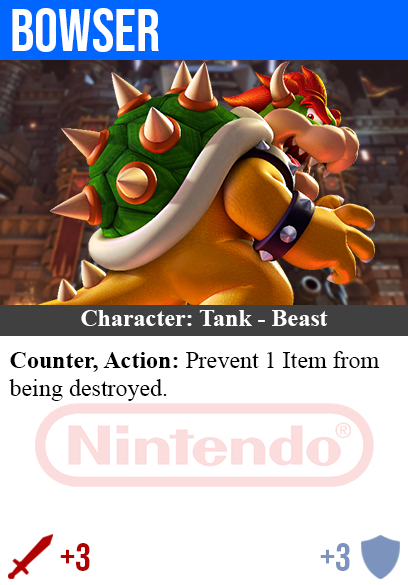
<style>
.page{position:relative;width:408px;height:585px;background:#ffffff}
.page>*{position:absolute;margin:0}
.t1{font:60px "BebasNeue-Regular";color:#ffffff}
.t2{font:24px "TimesNewRomanPS-BoldMT";color:#ffffff}
.t3{font:24px "TimesNewRomanPSMT";color:#000000}
.t4{font:24px "TimesNewRomanPS-BoldMT";color:#000000}
.t5{font:40px "BebasNeue-Regular";color:#af0202}
.t6{font:40px "BebasNeue-Regular";color:#7c94bd}
</style>
<div class="page">
<p class="t1" style="left:12px;top:8px;width:147px;height:44px">bowser</p>
<p class="t2" style="left:81px;top:310px;width:247px;height:16px">Character: Tank - Beast</p>
<p class="t3" style="left:9px;top:351px;width:371px;height:50px"><span class="t4">Counter, Action:</span> Prevent 1 Item from<br>being destroyed.</p>
<p class="t5" style="left:60px;top:543px;width:30px;height:28px">+3</p>
<p class="t6" style="left:320px;top:543px;width:30px;height:28px">+3</p>
</div>
